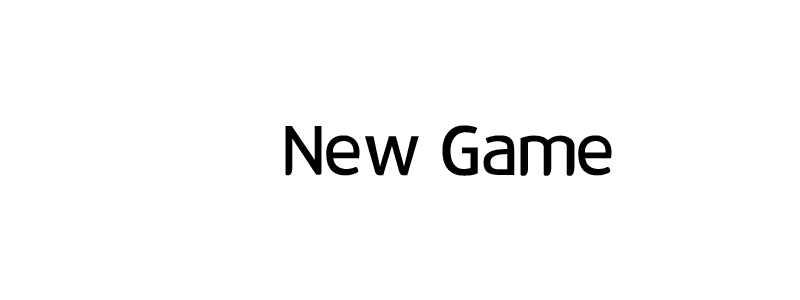
<style>
.page{position:relative;width:800px;height:300px;background:#ffffff}
.page>*{position:absolute;margin:0}
.t1{font:70px "12LotteMartDreamBold";color:#000000}
</style>
<div class="page">
<p class="t1" style="left:285px;top:125px;width:327px;height:51px">New Game</p>
</div>
